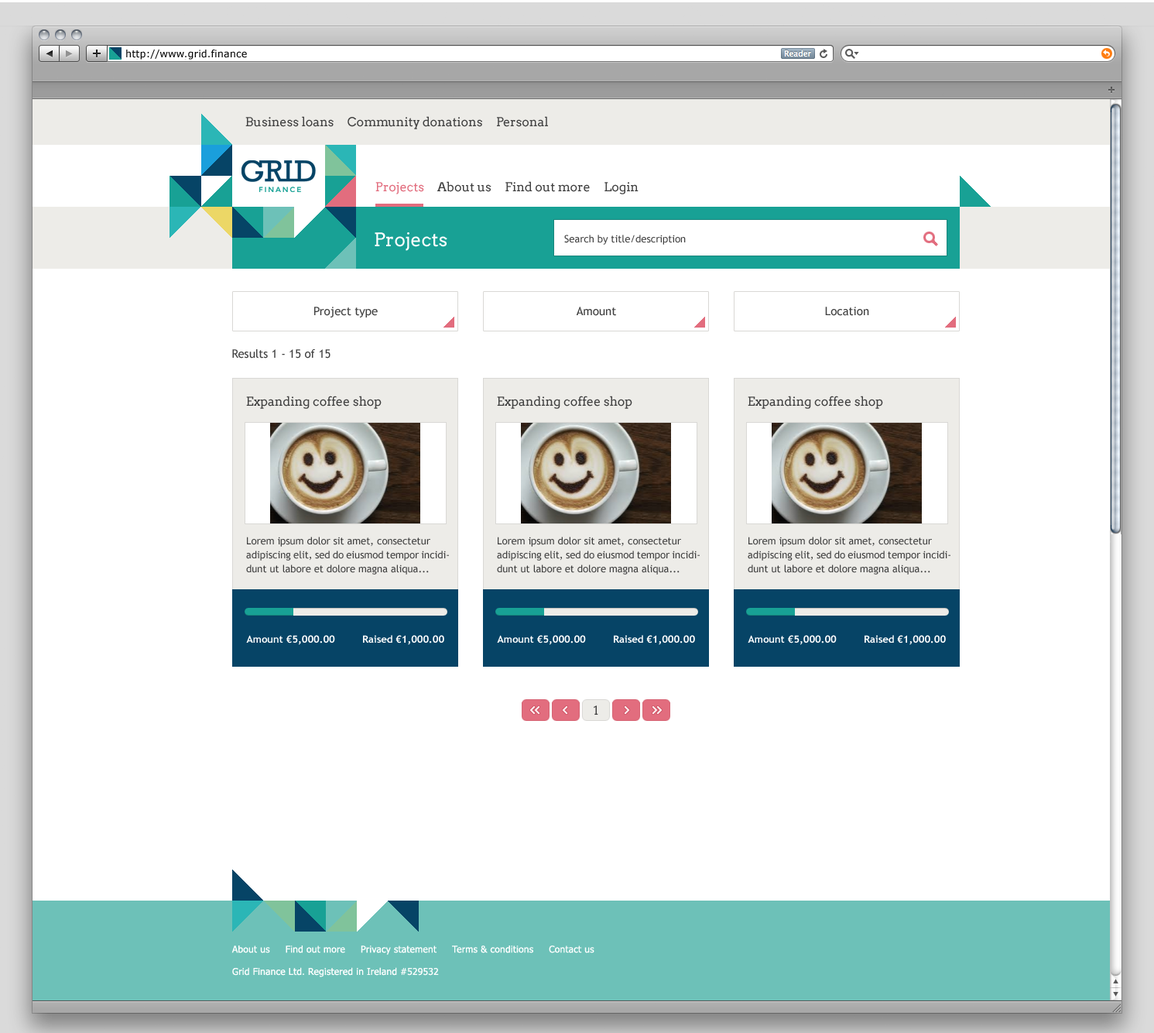
<style>
.page{position:relative;width:1154px;height:1033px;background:#ffffff}
.page>*{position:absolute;margin:0}
.t1{font:10.1px "Verdana";color:#000000}
.t2{font:12.4px "Arvo";color:#414141}
.t3{font:12.4px "Arvo";color:#e26d7e}
.t4{font:18.6px "Arvo";color:#ffffff}
.t5{font:10.1px "TrebuchetMS";color:#414141}
.t6{font:11.6px "TrebuchetMS";color:#414141}
.t7{font:10.1px/13.9px "TrebuchetMS";color:#414141}
.t8{font:10.1px "TrebuchetMS-Bold";color:#ffffff}
.t9{font:9.3px "Tahoma";letter-spacing:0.02em;color:#ffffff}
</style>
<div class="page">
<p class="t1" style="left:126px;top:50px;width:121px;height:10px">http://www.grid.finance</p>
<p class="t2" style="left:245px;top:116px;width:303px;height:13px">Business loans     Community donations     Personal</p>
<p class="t2" style="left:376px;top:181px;width:263px;height:13px"><span class="t3">Projects     </span>About us     Find out more     Login</p>
<p class="t4" style="left:375px;top:232px;width:73px;height:19px">Projects</p>
<p class="t5" style="left:564px;top:235px;width:122px;height:10px">Search by title/description</p>
<p class="t6" style="left:314px;top:307px;width:64px;height:10px">Project type</p>
<p class="t6" style="left:576px;top:307px;width:40px;height:9px">Amount</p>
<p class="t6" style="left:825px;top:307px;width:45px;height:9px">Location</p>
<p class="t6" style="left:232px;top:349px;width:99px;height:9px">Results 1 - 15 of 15</p>
<p class="t2" style="left:246px;top:396px;width:136px;height:13px">Expanding coffee shop</p>
<p class="t2" style="left:497px;top:396px;width:136px;height:13px">Expanding coffee shop</p>
<p class="t2" style="left:748px;top:396px;width:135px;height:13px">Expanding coffee shop</p>
<p class="t7" style="left:246px;top:537px;width:203px;height:38px">Lorem ipsum dolor sit amet, consectetur adipiscing elit, sed do eiusmod tempor incididunt ut labore et dolore magna aliqua...</p>
<p class="t7" style="left:497px;top:537px;width:203px;height:38px">Lorem ipsum dolor sit amet, consectetur adipiscing elit, sed do eiusmod tempor incididunt ut labore et dolore magna aliqua...</p>
<p class="t7" style="left:748px;top:537px;width:203px;height:38px">Lorem ipsum dolor sit amet, consectetur adipiscing elit, sed do eiusmod tempor incididunt ut labore et dolore magna aliqua...</p>
<p class="t8" style="left:246px;top:635px;width:198px;height:10px">Amount €5,000.00         Raised €1,000.00</p>
<p class="t8" style="left:497px;top:635px;width:198px;height:10px">Amount €5,000.00         Raised €1,000.00</p>
<p class="t8" style="left:748px;top:635px;width:198px;height:10px">Amount €5,000.00         Raised €1,000.00</p>
<p class="t2" style="left:594px;top:705px;width:5px;height:10px">1</p>
<p class="t9" style="left:232px;top:945px;width:363px;height:32px">About us     Find out more     Privacy statement     Terms &amp; conditions     Contact us<br><br>Grid Finance Ltd. Registered in Ireland #529532</p>
</div>
